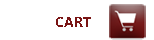
<style>
.page{position:relative;width:154px;height:40px;background:#ffffff}
.page>*{position:absolute;margin:0}
.t1{font:16px "Calibri-Bold";color:#791414}
</style>
<div class="page">
<p class="t1" style="left:56px;top:17px;width:35px;height:10px">CART</p>
</div>
